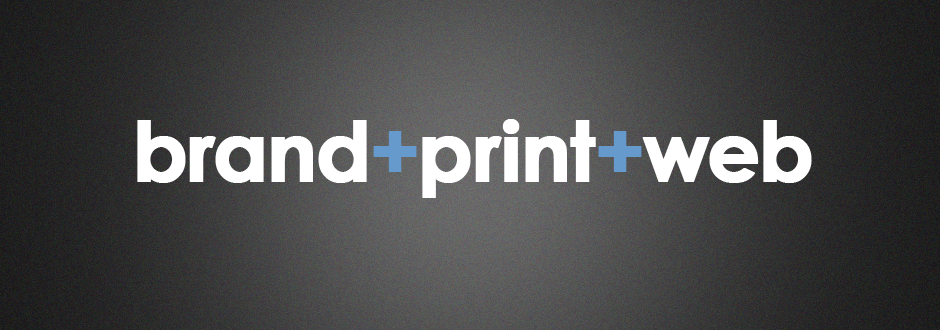
<style>
.page{position:relative;width:940px;height:330px}
.page>*{position:absolute;margin:0}
.t1{font:83.3px "CenturyGothic-Bold";letter-spacing:-0.02em;color:#ffffff;font-weight:bold}
.t2{font:83.3px "CenturyGothic-Bold";letter-spacing:-0.02em;color:#6699cc;font-weight:bold}
</style>
<div class="page">
<p class="t1" style="left:137px;top:119px;width:675px;height:79px">brand<span class="t2">+</span>print<span class="t2">+</span>web</p>
</div>
